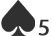
<style>
.page{position:relative;width:52px;height:36px;background:#ffffff}
.page>*{position:absolute;margin:0}
.t1{font:23.4px "MyriadPro-Regular";letter-spacing:-0.1em;color:#303030;font-weight:bold}
</style>
<div class="page">
<p class="t1" style="left:38px;top:19px;width:11px;height:17px">5</p>
</div>
